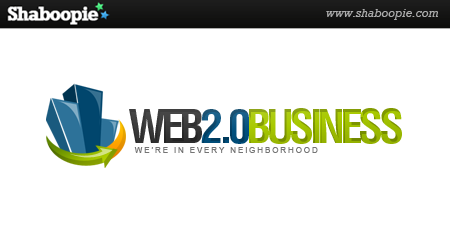
<style>
.page{position:relative;width:450px;height:250px;background:#ffffff}
.page>*{position:absolute;margin:0}
.t1{font:45.8px "Helvetica-Condensed-Bold";letter-spacing:-0.11em;color:#a8c900;text-transform:uppercase}
.t2{font:45.8px "Helvetica-Condensed-Bold";letter-spacing:-0.11em;color:#2f2f2f;text-transform:uppercase}
.t3{font:45.8px "Helvetica-Condensed-Bold";letter-spacing:-0.11em;color:#00507e;text-transform:uppercase}
.t4{font:8.3px "ArialMT";letter-spacing:0.2em;color:#747474;text-transform:uppercase}
</style>
<div class="page">
<p class="t1" style="left:129px;top:108px;width:273px;height:36px"><span class="t2">WEB</span><span class="t3">2.0</span>BUSINESS</p>
<p class="t4" style="left:134px;top:147px;width:184px;height:6px">WE’RE IN EVERY NEIGHBORHOOD</p>
</div>
